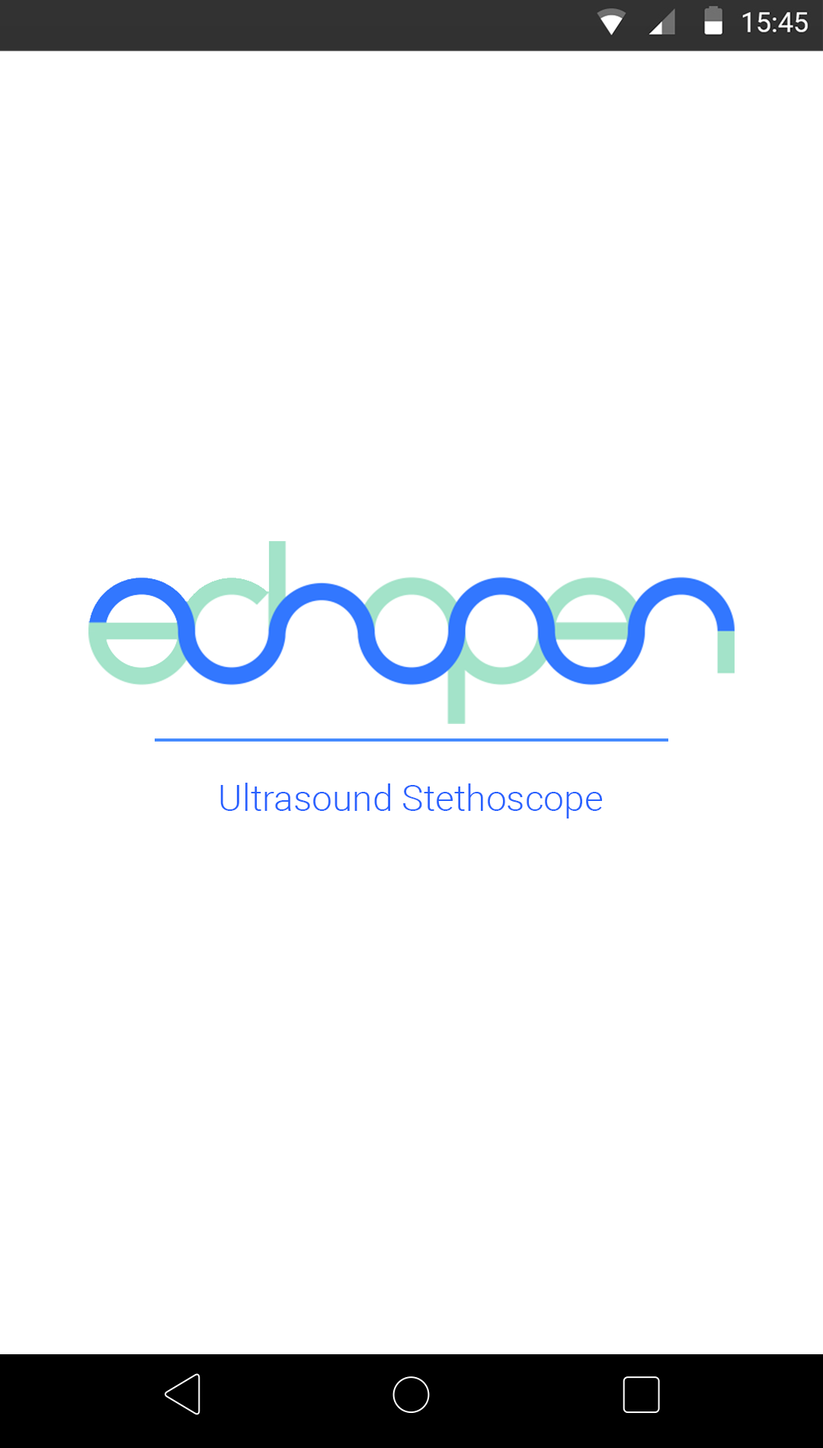
<style>
.page{position:relative;width:823px;height:1448px;background:#ffffff}
.page>*{position:absolute;margin:0}
.t1{font:36.6px "Roboto-Light";color:#2962ff}
</style>
<div class="page">
<p class="t1" style="left:220px;top:783px;width:382px;height:36px">Ultrasound Stethoscope</p>
</div>
